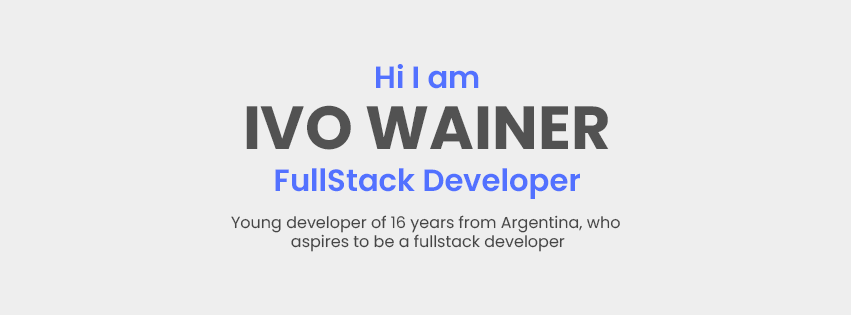
<style>
.page{position:relative;width:851px;height:315px;background:#eeeeee}
.page>*{position:absolute;margin:0}
.t1{font:30.7px "Poppins-SemiBold";color:#5271ff}
.t2{font:60.7px "Poppins-Bold";color:#525252}
.t3{font:16px "Poppins-Regular";color:#454545}
</style>
<div class="page">
<p class="t1" style="left:376px;top:64px;width:103px;height:25px">Hi I am</p>
<p class="t2" style="left:246px;top:105px;width:363px;height:45px">IVO WAINER</p>
<p class="t1" style="left:275px;top:168px;width:305px;height:31px">FullStack Developer</p>
<p class="t3" style="left:231px;top:215px;width:389px;height:37px;text-align:center">Young developer of 16 years from Argentina, who <br>aspires to be a fullstack developer</p>
</div>
